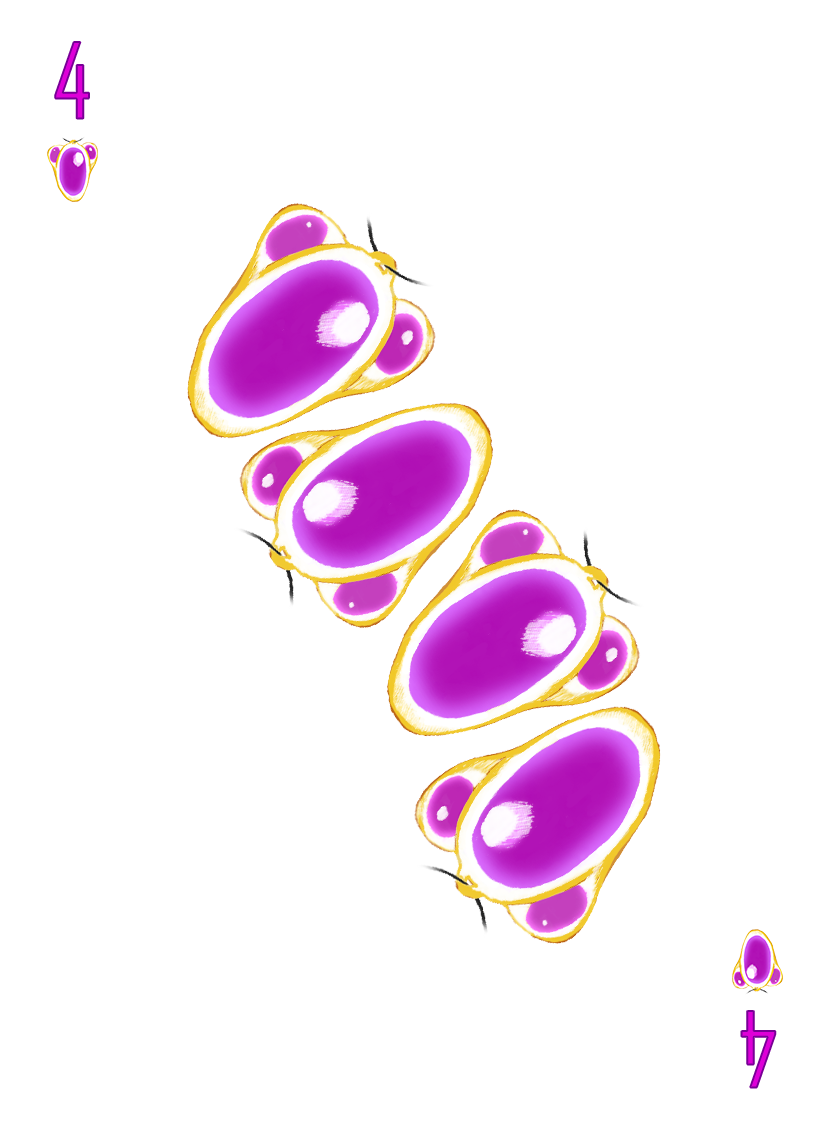
<style>
.page{position:relative;width:825px;height:1125px;background:#ffffff}
.page>*{position:absolute;margin:0}
.t1{font:100px "AgencyFB-Reg";color:#de00d8}
</style>
<div class="page">
<p class="t1" style="left:55px;top:42px;width:34px;height:77px">4</p>
<p class="t1" style="left:741px;top:1011px;width:35px;height:77px;rotate:180deg">4</p>
</div>
